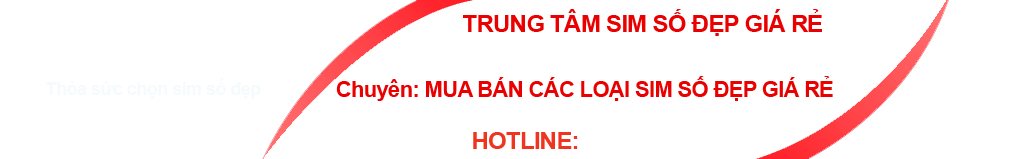
<style>
.page{position:relative;width:1020px;height:159px;background:#ffffff}
.page>*{position:absolute;margin:0}
.t1{font:24px "Arial-BoldMT";letter-spacing:-0.03em;color:#e90000}
.t2{font:18px "Arial-BoldMT";letter-spacing:-0.03em;color:#f5fafd}
.t3{font:22px "Arial-BoldMT";letter-spacing:-0.03em;color:#e90000}
.t4{font:24px "Arial-BoldMT";letter-spacing:-0.03em;color:#ef3520;text-transform:uppercase}
</style>
<div class="page">
<p class="t1" style="left:463px;top:9px;width:359px;height:27px">TRUNG TÂM SIM SỐ ĐẸP GIÁ RẺ</p>
<p class="t2" style="left:46px;top:78px;width:215px;height:21px">Thỏa sức chọn sim số đẹp</p>
<p class="t3" style="left:336px;top:76px;width:497px;height:25px">Chuyên: MUA BÁN CÁC LOẠI SIM SỐ ĐẸP GIÁ RẺ</p>
<p class="t4" style="left:473px;top:132px;width:105px;height:17px">Hotline:</p>
</div>
